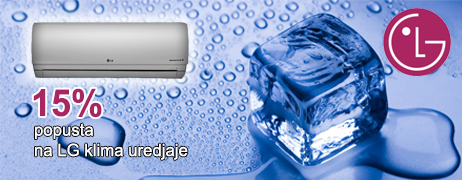
<style>
.page{position:relative;width:462px;height:180px}
.page>*{position:absolute;margin:0}
.t1{font:37.3px "Arial-BoldMT";color:#aa2662;scale:0.97 1}
.t2{font:4.1px "ArialMT";color:#ffffff}
</style>
<div class="page">
<p class="t1" style="left:33px;top:88px;width:69px;height:30px">15%</p>
<p class="t2" style="left:35px;top:123px;width:153px;height:37px">popusta<br>na LG klima uredjaje</p>
</div>
